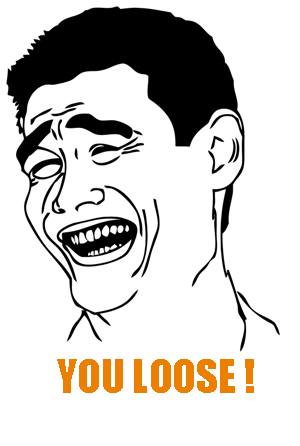
<style>
.page{position:relative;width:300px;height:446px;background:#ffffff}
.page>*{position:absolute;margin:0}
.t1{font:43.2px "Impact";color:#ec7f00}
</style>
<div class="page">
<p class="t1" style="left:57px;top:359px;width:197px;height:34px">YOU LOOSE !</p>
</div>
